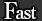
<style>
.page{position:relative;width:42px;height:21px;background:#333333}
.page>*{position:absolute;margin:0}
.t1{font:18px "RyuminPro-ExBold";letter-spacing:-0.04em;color:#ffffff;scale:0.9 1}
.t2{font:22px "RyuminPro-ExBold";letter-spacing:-0.04em;color:#ffffff;scale:0.9 1}
</style>
<div class="page">
<p class="t1" style="left:4px;top:2px;width:33px;height:18px"><span class="t2">F</span>ast</p>
</div>
